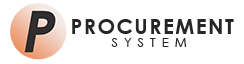
<style>
.page{position:relative;width:244px;height:64px;background:#ffffff}
.page>*{position:absolute;margin:0}
.t1{font:20.9px "CenturyGothic-Bold";letter-spacing:0.075em;color:#262626}
.t2{font:12.5px "CenturyGothic";letter-spacing:0.5em;color:#262626}
</style>
<div class="page">
<p class="t1" style="left:72px;top:19px;width:162px;height:15px">PROCUREMENT</p>
<p class="t2" style="left:111px;top:38px;width:76px;height:9px">SYSTEM</p>
</div>
